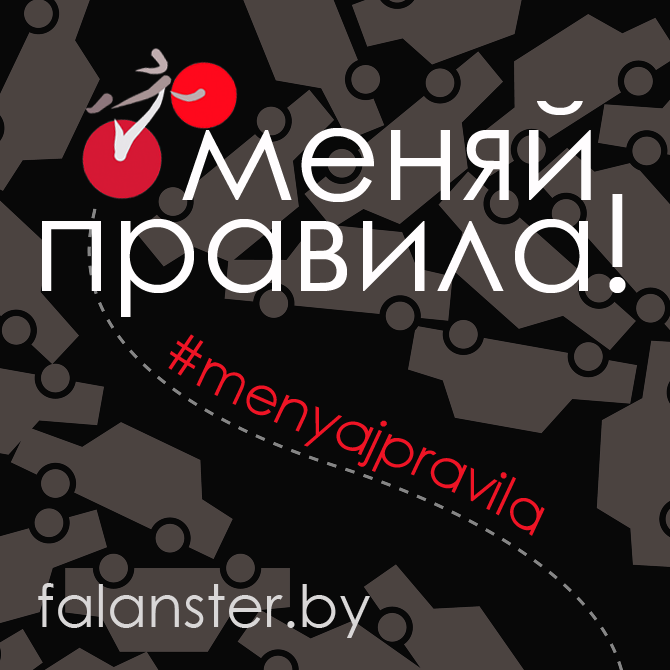
<style>
.page{position:relative;width:670px;height:670px;background:#080808}
.page>*{position:absolute;margin:0}
.t1{font:132px/91.3px "CenturyGothic";color:#fffefe}
.t2{font:53.9px "CenturyGothic";color:#f01526}
.t3{font:59px "CenturyGothic";color:#d9d7d7}
</style>
<div class="page">
<p class="t1" style="left:42px;top:101px;width:584px;height:216px;text-align:right">меняй <br>правила!</p>
<p class="t2" style="left:168px;top:334px;width:377px;height:202px;rotate:25deg">#menyajpravila</p>
<p class="t3" style="left:38px;top:583px;width:332px;height:55px">falanster.by</p>
</div>
